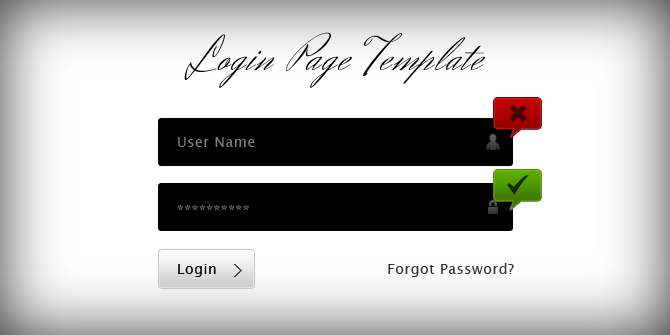
<style>
.page{position:relative;width:670px;height:335px;background:#ffffff}
.page>*{position:absolute;margin:0}
.t1{font:48.4px "HerrVonMuellerhoff";letter-spacing:0.04em;color:#000000}
.t2{font:14px "LucidaSansUnicode";letter-spacing:0.04em;color:#808080}
.t3{font:14px "LucidaSansUnicode";letter-spacing:0.04em}
.t4{font:14px "LucidaSansUnicode";letter-spacing:0.04em;color:#000000}
.t5{font:14px "LucidaSansUnicode";letter-spacing:0.04em;color:#333333}
</style>
<div class="page">
<p class="t1" style="left:184px;top:32px;width:301px;height:56px">Login Page Template</p>
<p class="t2" style="left:178px;top:137px;width:77px;height:10px">User Name</p>
<p class="t3" style="left:177px;top:205px;width:72px;height:5px">**********</p>
<p class="t4" style="left:178px;top:264px;width:38px;height:13px">Login</p>
<p class="t5" style="left:388px;top:263px;width:126px;height:14px">Forgot Password?</p>
</div>
